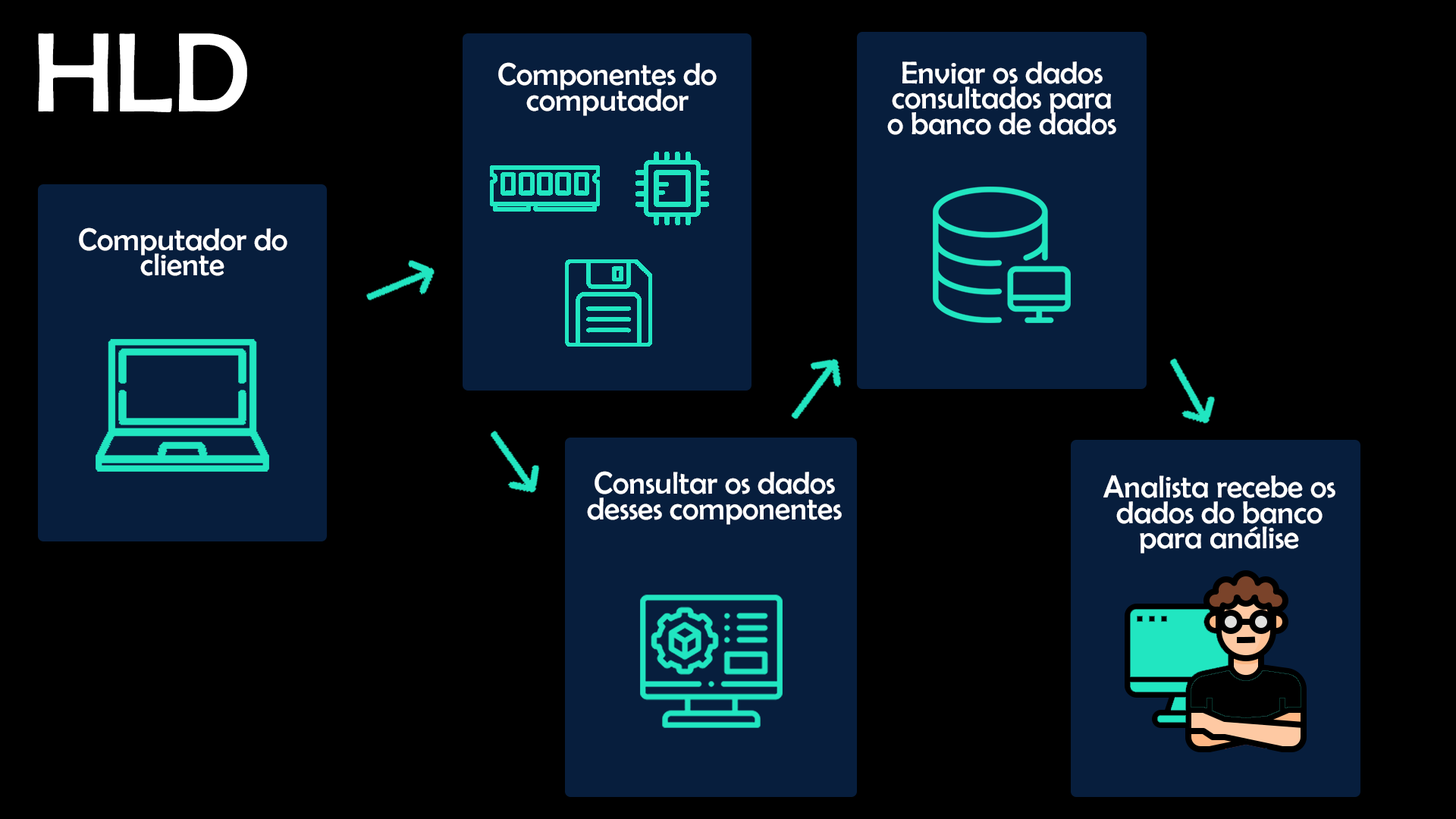
<style>
.page{position:relative;width:1456px;height:819px;background:#000000}
.page>*{position:absolute;margin:0}
.t1{font:113.7px "BerlinSansFB-Reg";color:#ffffff}
.t2{font:31.6px/25.3px "BerlinSansFB-Reg";color:#ffffff}
</style>
<div class="page">
<p class="t1" style="left:38px;top:33px;width:209px;height:79px">HLD</p>
<p class="t2" style="left:498px;top:62px;width:219px;height:54px;text-align:center">Componentes do<br>computador</p>
<p class="t2" style="left:887px;top:61px;width:229px;height:74px;text-align:center">Enviar os dados<br>consultados para<br>o banco de dados</p>
<p class="t2" style="left:79px;top:227px;width:208px;height:49px;text-align:center">Computador do<br>cliente</p>
<p class="t2" style="left:587px;top:471px;width:255px;height:54px;text-align:center">Consultar os dados<br>desses componentes</p>
<p class="t2" style="left:1103px;top:475px;width:232px;height:79px;text-align:center">Analista recebe os<br>dados do banco<br>para análise</p>
</div>
